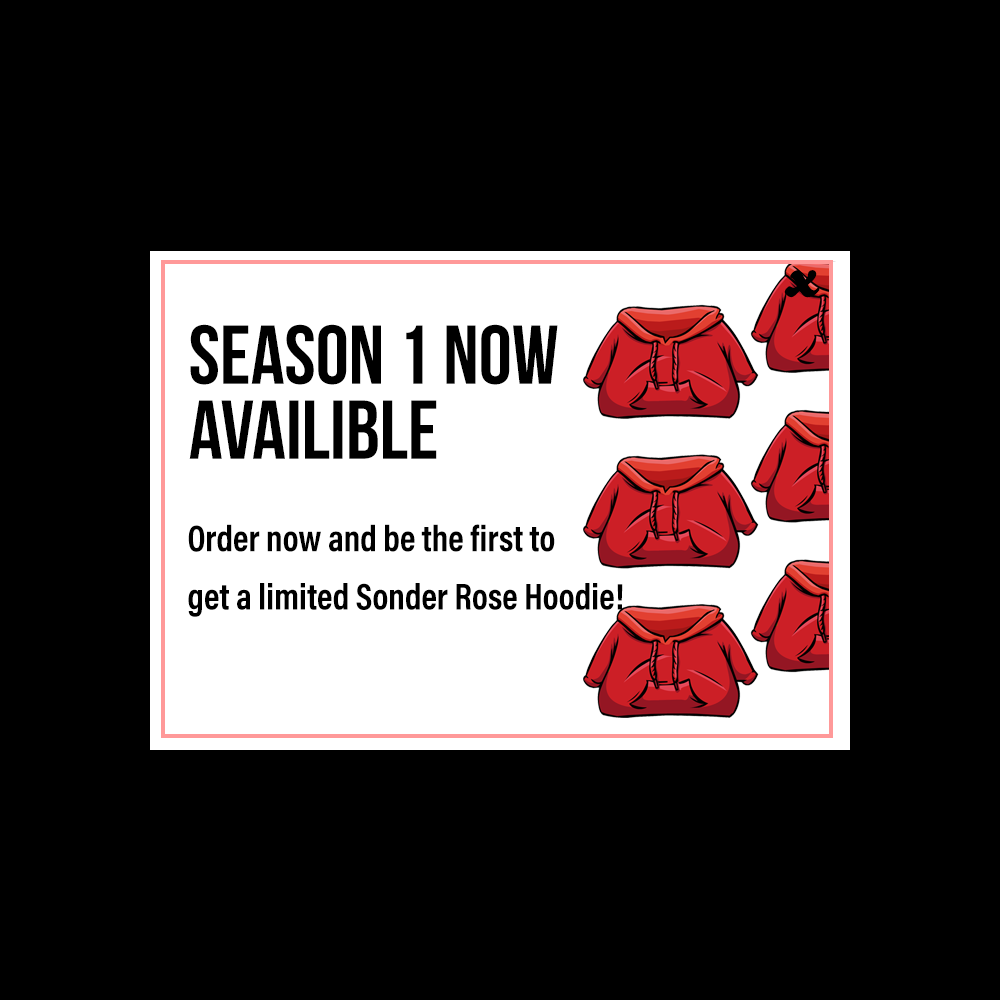
<style>
.page{position:relative;width:1000px;height:1000px;background:#000000}
.page>*{position:absolute;margin:0}
.t1{font:85.4px "Funkydori";color:#000000}
.t2{font:83.3px/75px "BebasNeue";color:#000000}
.t3{font:37.5px/58.3px "AcuminProCond-Bold";color:#000000;scale:0.94 1}
</style>
<div class="page">
<p class="t1" style="left:784px;top:270px;width:36px;height:28px">x</p>
<p class="t2" style="left:189px;top:324px;width:369px;height:135px">Season 1 now <br>availible</p>
<p class="t3" style="left:188px;top:524px;width:435px;height:93px">Order now and be the first to <br>get a limited Sonder Rose Hoodie!</p>
</div>
